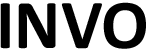
<style>
.page{position:relative;width:146px;height:50px;background:#ffffff}
.page>*{position:absolute;margin:0}
.t1{font:70.6px "Calibri-Bold";color:#000000}
</style>
<div class="page">
<p class="t1" style="left:0px;top:2px;width:146px;height:47px">INVO</p>
</div>
